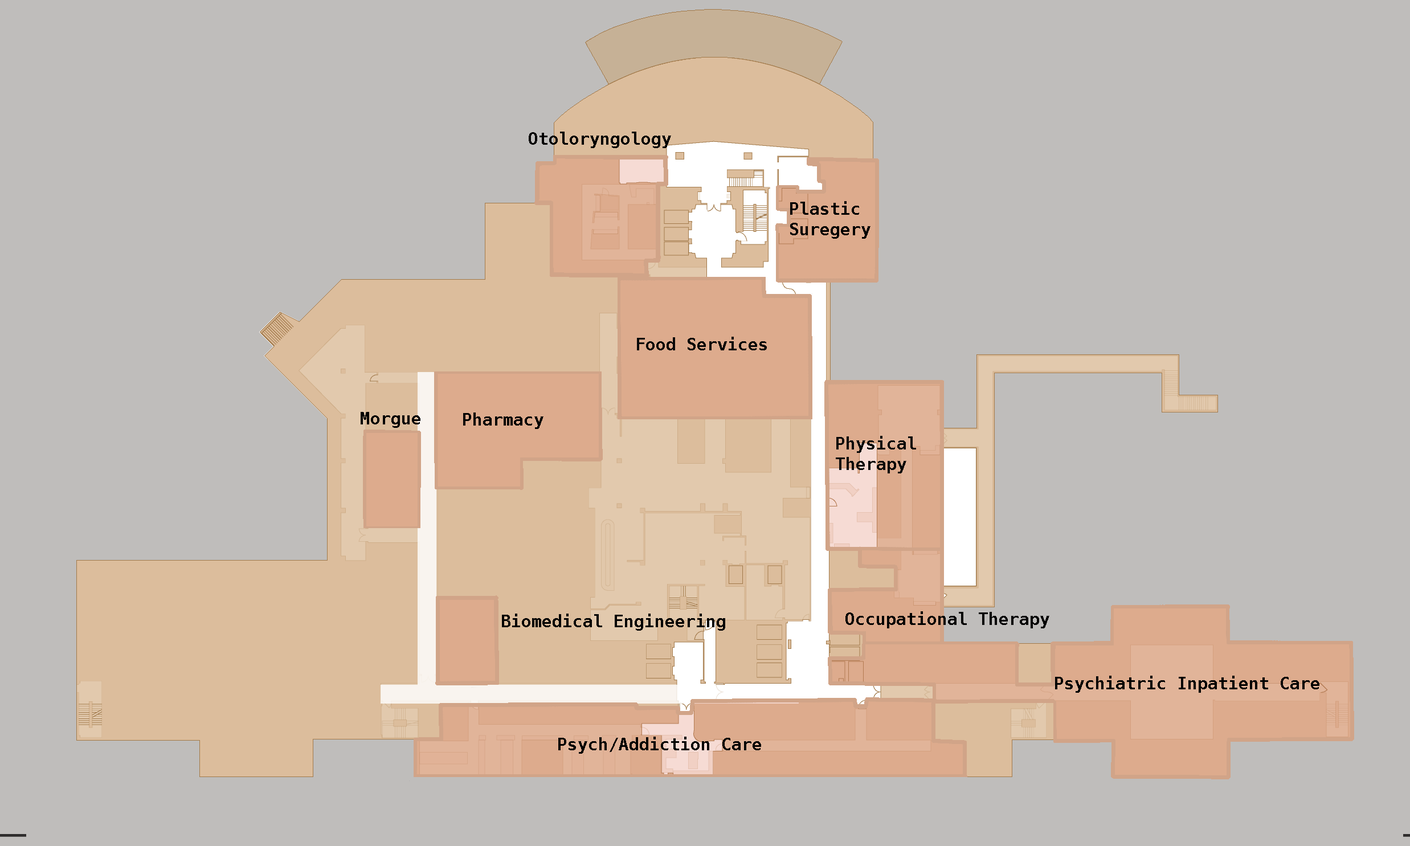
<style>
.page{position:relative;width:1410px;height:846px;background:#bfbdbb}
.page>*{position:absolute;margin:0}
.t1{font:17.1px "Menlo-Bold";color:#000000}
.t2{font:17.1px "Menlo-Bold";color:#080808}
</style>
<div class="page">
<p class="t1" style="left:529px;top:132px;width:142px;height:16px">Otoloryngology</p>
<p class="t1" style="left:790px;top:201px;width:80px;height:38px">Plastic <br>Suregery</p>
<p class="t2" style="left:637px;top:337px;width:130px;height:13px">Food Services</p>
<p class="t1" style="left:361px;top:412px;width:59px;height:16px">Morgue</p>
<p class="t1" style="left:463px;top:412px;width:80px;height:17px">Pharmacy</p>
<p class="t2" style="left:836px;top:436px;width:80px;height:37px">Physical <br>Therapy</p>
<p class="t1" style="left:502px;top:613px;width:223px;height:18px">Biomedical Engineering</p>
<p class="t1" style="left:845px;top:611px;width:204px;height:17px">Occupational Therapy</p>
<p class="t1" style="left:1055px;top:676px;width:264px;height:17px">Psychiatric Inpatient Care</p>
<p class="t1" style="left:558px;top:736px;width:203px;height:18px">Psych/Addiction Care</p>
</div>
